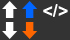
<style>
.page{position:relative;width:70px;height:40px;background:#333333}
.page>*{position:absolute;margin:0}
.t1{font:18px "ArialRoundedMTBold";color:#ffffff}
</style>
<div class="page">
<p class="t1" style="left:43px;top:4px;width:25px;height:13px">&lt;/&gt;</p>
</div>
